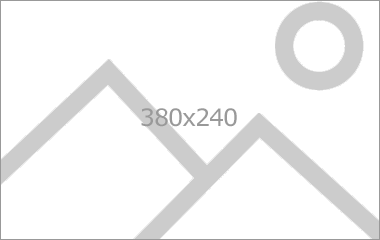
<style>
.page{position:relative;width:380px;height:240px;background:#ffffff}
.page>*{position:absolute;margin:0}
.t1{font:24px "Verdana";letter-spacing:-0.05em;color:#999999}
</style>
<div class="page">
<p class="t1" style="left:141px;top:108px;width:96px;height:19px">380x240</p>
</div>
